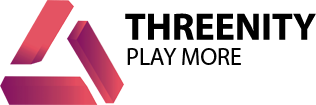
<style>
.page{position:relative;width:316px;height:105px;background:#ffffff}
.page>*{position:absolute;margin:0}
.t1{font:38px "MyriadPro-Bold";color:#000000}
.t2{font:24.2px "MyriadPro-Regular";color:#010101}
</style>
<div class="page">
<p class="t1" style="left:125px;top:13px;width:191px;height:27px">THREENITY</p>
<p class="t2" style="left:127px;top:48px;width:114px;height:17px">PLAY MORE</p>
</div>
